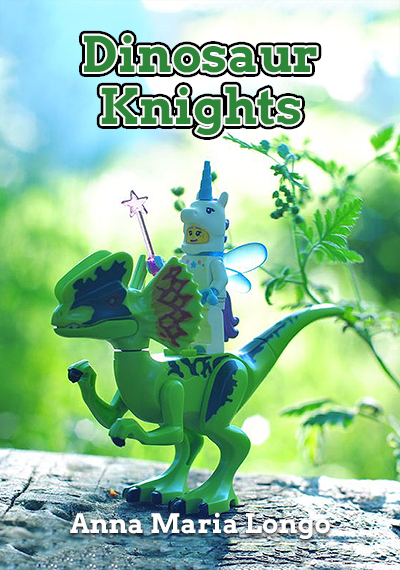
<style>
.page{position:relative;width:400px;height:570px}
.page>*{position:absolute;margin:0}
.t1{font:49.1px/52px "Arvo-Bold";color:#2e8739}
.t2{font:26.8px "Arvo-Bold";color:#fefefe}
</style>
<div class="page">
<p class="t1" style="left:84px;top:35px;width:233px;height:100px;text-align:center">Dinosaur<br>Knights</p>
<p class="t2" style="left:70px;top:512px;width:260px;height:27px">Anna Maria Longo</p>
</div>
